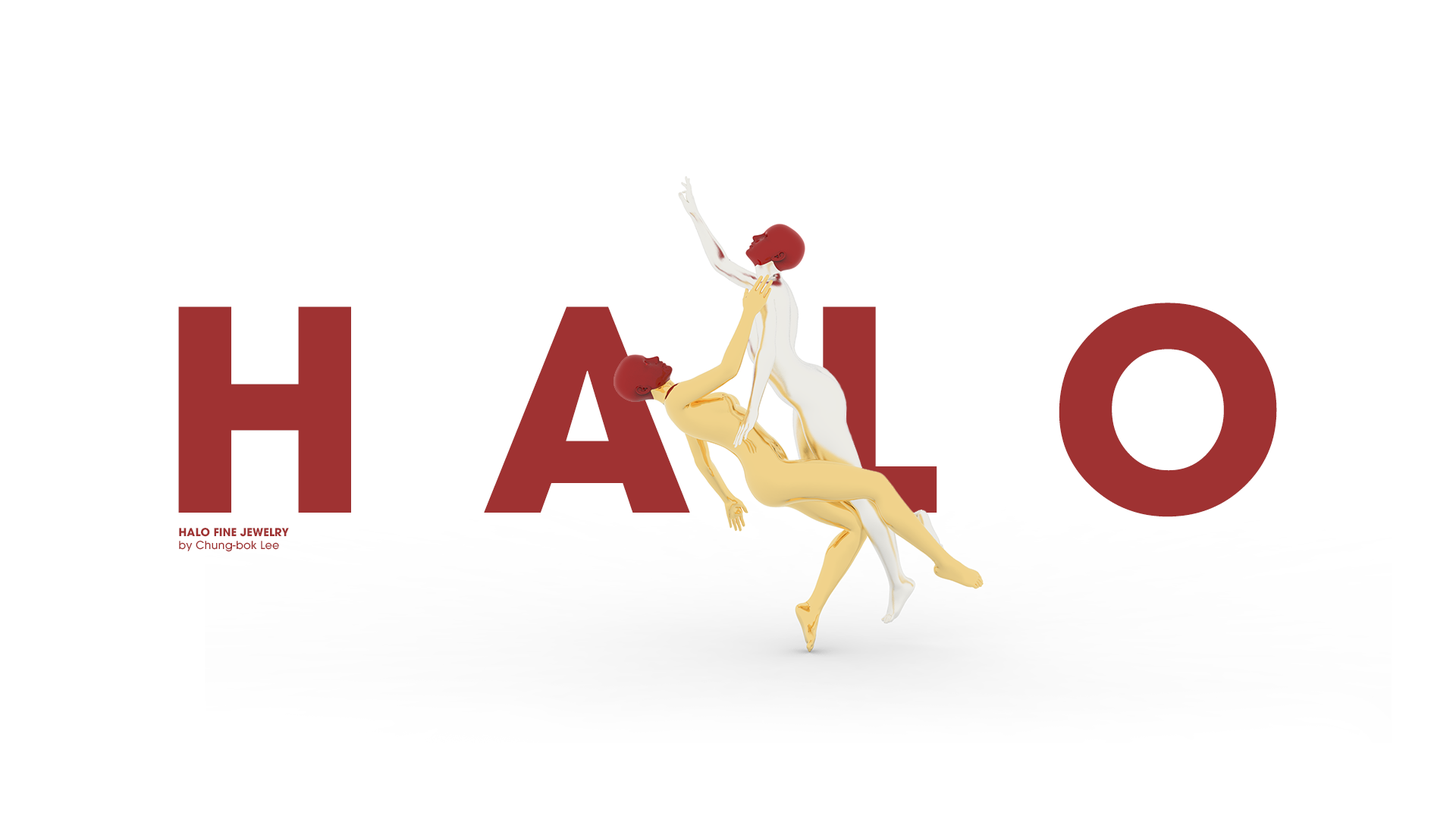
<style>
.page{position:relative;width:1456px;height:819px;background:#ffffff}
.page>*{position:absolute;margin:0}
.t1{font:278.1px "ITCAvantGardeStd-Bold";letter-spacing:0.4em;color:#9f3232}
.t2{font:11.1px/12.6px "ITCAvantGardeStd-Bold";color:#9f3232}
.t3{font:11.1px/12.6px "ITCAvantGardeStd-Md";color:#9f3232}
</style>
<div class="page">
<p class="t1" style="left:178px;top:303px;width:1099px;height:214px">HALO</p>
<p class="t2" style="left:179px;top:528px;width:110px;height:24px">HALO FINE JEWELRY<br><span class="t3">by Chung-bok Lee</span></p>
</div>
